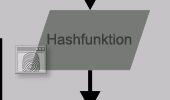
<style>
.page{position:relative;width:170px;height:100px;background:#c6c3c6}
.page>*{position:absolute;margin:0}
.t1{font:14.7px "ArialMT";color:#3b3c3b}
</style>
<div class="page">
<p class="t1" style="left:47px;top:33px;width:85px;height:12px">Hashfunktion</p>
</div>
